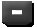
<style>
.page{position:relative;width:37px;height:28px;background:#ffffff}
.page>*{position:absolute;margin:0}
.t1{font:19.4px "Splatoon2";color:#ffffff}
</style>
<div class="page">
<p class="t1" style="left:12px;top:10px;width:9px;height:5px">-</p>
</div>
